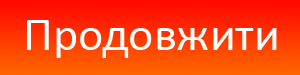
<style>
.page{position:relative;width:300px;height:75px}
.page>*{position:absolute;margin:0}
.t1{font:48px "Calibri";color:#ffffff}
</style>
<div class="page">
<p class="t1" style="left:27px;top:20px;width:250px;height:38px">Продовжити</p>
</div>
